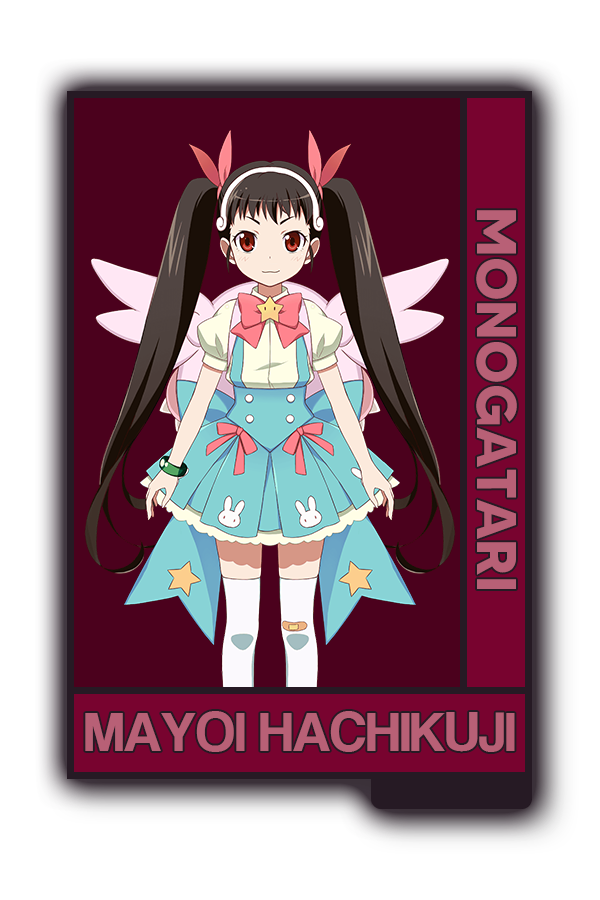
<style>
.page{position:relative;width:600px;height:900px;background:#ffffff}
.page>*{position:absolute;margin:0}
.t1{font:55.8px "MADETOMMY-Bold";color:#b86076}
.t2{font:57.7px "CoolveticaRg-Regular";color:#b86076}
</style>
<div class="page">
<p class="t1" style="left:476px;top:210px;width:41px;height:379px;rotate:90deg">MONOGATARI</p>
<p class="t2" style="left:85px;top:711px;width:430px;height:41px">MAYOI HACHIKUJI</p>
</div>
